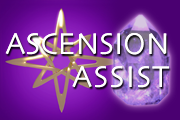
<style>
.page{position:relative;width:180px;height:120px}
.page>*{position:absolute;margin:0}
.t1{font:31.3px/32.8px "Skia-Regular";color:#ffffff;scale:0.95 1}
.t2{font:31.3px/32.8px "Skia-Regular";letter-spacing:0.04em;color:#ffffff;scale:0.95 1}
</style>
<div class="page">
<p class="t1" style="left:5px;top:33px;width:164px;height:55px;text-align:right">ASCENSION<br><span class="t2">ASSIST</span></p>
<p class="t1" style="left:5px;top:33px;width:164px;height:55px;text-align:right">ASCENSION<br><span class="t2">ASSIST</span></p>
</div>
